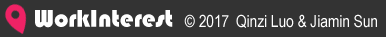
<style>
.page{position:relative;width:386px;height:37px;background:#333333}
.page>*{position:absolute;margin:0}
.t1{font:25px "Bauhaus93";color:#ffffff}
.t2{font:16.7px "ArialNarrow";color:#ffffff}
</style>
<div class="page">
<p class="t1" style="left:35px;top:10px;width:138px;height:18px">WorkInterest</p>
<p class="t2" style="left:184px;top:14px;width:45px;height:14px">© 2017</p>
<p class="t2" style="left:236px;top:14px;width:141px;height:14px">Qinzi Luo &amp; Jiamin Sun</p>
</div>
